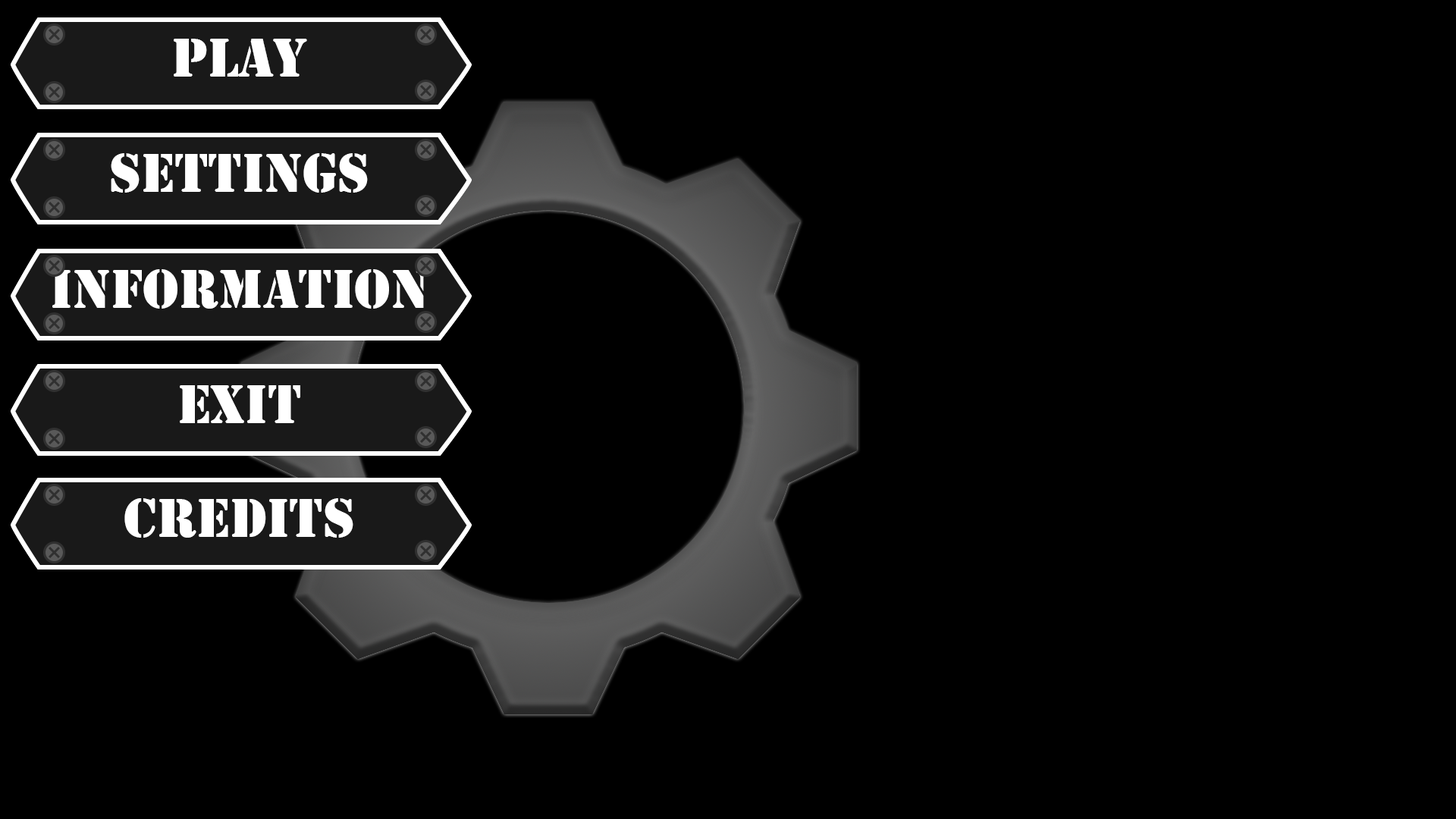
<style>
.page{position:relative;width:1456px;height:819px;background:#000000}
.page>*{position:absolute;margin:0}
.t1{font:56.9px "Stencil";color:#ffffff}
</style>
<div class="page">
<p class="t1" style="left:174px;top:39px;width:133px;height:38px">Play</p>
<p class="t1" style="left:111px;top:153px;width:257px;height:40px">Settings</p>
<p class="t1" style="left:52px;top:269px;width:376px;height:40px">Information</p>
<p class="t1" style="left:180px;top:385px;width:120px;height:38px">Exit</p>
<p class="t1" style="left:124px;top:498px;width:229px;height:40px">credits</p>
</div>
